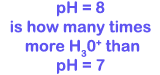
<style>
.page{position:relative;width:160px;height:75px;background:#ffffff}
.page>*{position:absolute;margin:0}
.t1{font:16px "ArialRoundedMTBold";color:#5f54f1}
</style>
<div class="page">
<p class="t1" style="left:10px;top:1px;width:141px;height:73px;text-align:center">pH = 8<br>is how many times<br> more H30+ than<br>pH = 7</p>
</div>
